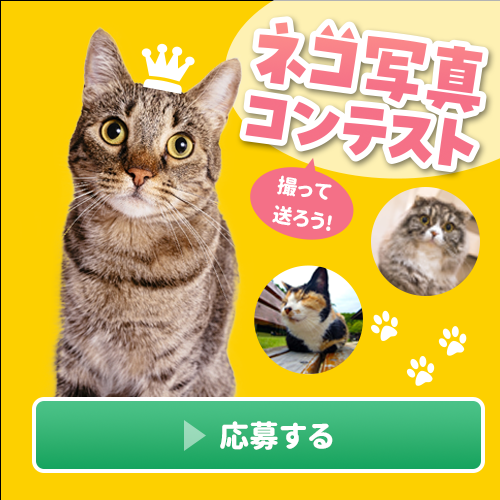
<style>
.page{position:relative;width:500px;height:500px;background:#fdd000}
.page>*{position:absolute;margin:0}
.t1{font:20px/30px "GenJyuuGothicX-P-Heavy";color:#ffffff}
.t2{font:30px "GenJyuuGothicX-P-Heavy";color:#ffffff}
.t3{font:56.5px "HGPSoeiPresenceEB";color:#ffffff}
</style>
<div class="page">
<p class="t1" style="left:272px;top:175px;width:60px;height:56px;rotate:9deg">撮って<br>送ろう!</p>
<p class="t2" style="left:220px;top:421px;width:113px;height:29px"><span class="t3">　　　　　　</span>応募する</p>
</div>
